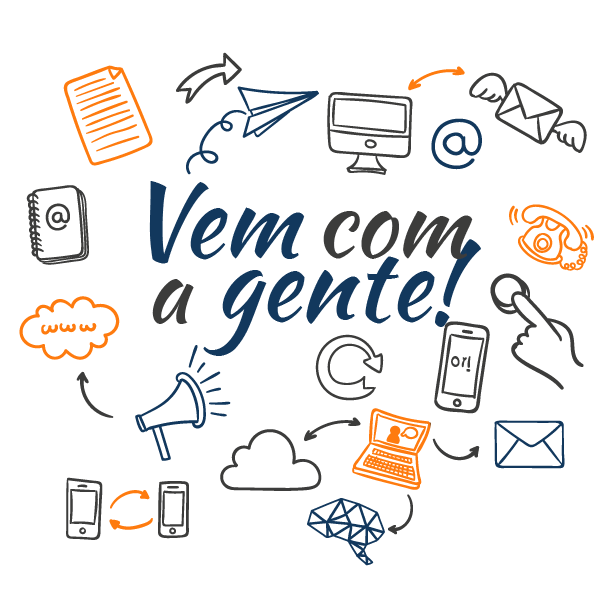
<style>
.page{position:relative;width:600px;height:600px;background:#ffffff}
.page>*{position:absolute;margin:0}
.t1{font:100px "KaushanScript-Regular";color:#12385d}
.t2{font:94px "KaushanScript-Regular";color:#3c3c3b}
</style>
<div class="page">
<p class="t1" style="left:149px;top:181px;width:156px;height:83px">Vem</p>
<p class="t2" style="left:323px;top:211px;width:150px;height:48px">com</p>
<p class="t1" style="left:203px;top:239px;width:278px;height:117px">gente!</p>
<p class="t2" style="left:152px;top:279px;width:42px;height:45px">a</p>
</div>
